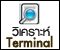
<style>
.page{position:relative;width:60px;height:50px;background:#ffffff}
.page>*{position:absolute;margin:0}
.t1{font:18px "PSLxKittithada-Bold";color:#202020}
.t2{font:18px "PSLxKittithada-Bold";color:#3d2b03;font-weight:bold}
</style>
<div class="page">
<p class="t1" style="left:12px;top:26px;width:38px;height:11px">วิเคราะห์</p>
<p class="t2" style="left:6px;top:35px;width:47px;height:13px">Terminal</p>
</div>
